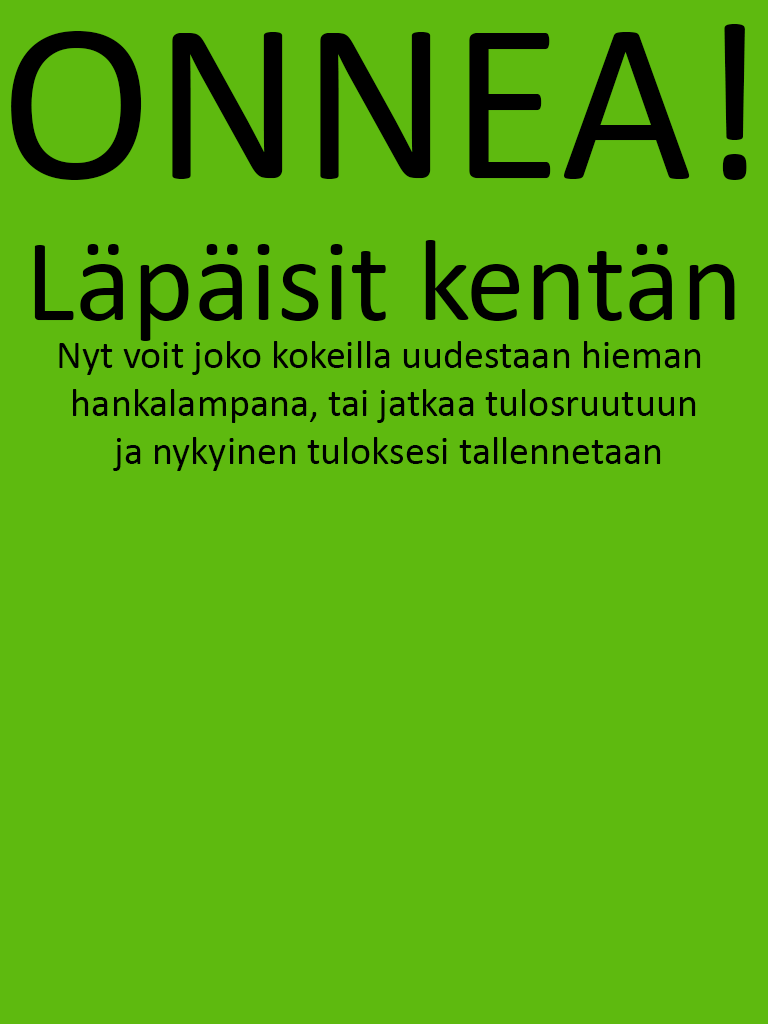
<style>
.page{position:relative;width:768px;height:1024px;background:#5eba0f}
.page>*{position:absolute;margin:0}
.t1{font:40px "Calibri";color:#000000}
.t2{font:230px "Calibri";color:#000000}
.t3{font:118px "Calibri";color:#000000}
</style>
<div class="page">
<p class="t1" style="left:11px;top:24px;width:736px;height:447px;text-align:center"><span class="t2">ONNEA!<br></span><span class="t3">Läpäisit kentän<br></span>Nyt voit joko kokeilla uudestaan hieman <br>hankalampana, tai jatkaa tulosruutuun<br> ja nykyinen tuloksesi tallennetaan</p>
</div>
